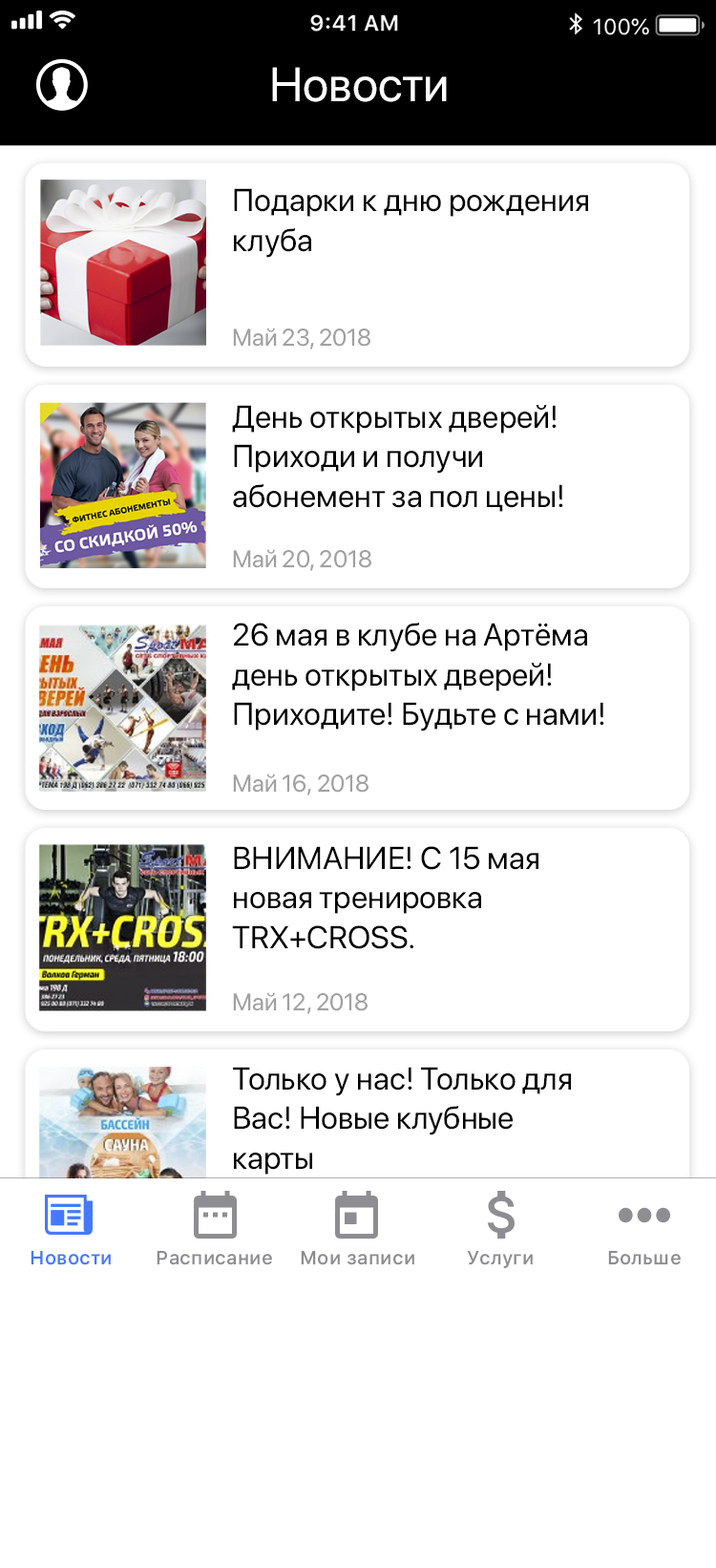
<style>
.page{position:relative;width:716px;height:1568px;background:#ffffff}
.page>*{position:absolute;margin:0}
.t1{font:47.7px "SFProDisplay-Regular";color:#ffffff}
.t2{font:31.5px/39.8px "SFProDisplay-Regular";color:#000000}
.t3{font:23.9px "SFProDisplay-Regular";color:#a1a1a1}
.t4{font:19px "SFProText-Medium";letter-spacing:0.012em;color:#4479fb}
.t5{font:19px "SFProText-Medium";letter-spacing:0.012em;color:#8d8d91}
</style>
<div class="page">
<p class="t1" style="left:272px;top:67px;width:175px;height:35px">Новости</p>
<p class="t2" style="left:234px;top:188px;width:354px;height:70px">Подарки к дню рождения<br>клуба</p>
<p class="t3" style="left:233px;top:328px;width:138px;height:22px">Май 23, 2018</p>
<p class="t2" style="left:232px;top:405px;width:331px;height:107px">День открытых дверей! <br>Приходи и получи <br>абонемент за пол цены!</p>
<p class="t3" style="left:233px;top:549px;width:138px;height:22px">Май 20, 2018</p>
<p class="t2" style="left:232px;top:623px;width:372px;height:108px">26 мая в клубе на Артёма <br>день открытых дверей! <br>Приходите! Будьте с нами!</p>
<p class="t3" style="left:233px;top:773px;width:136px;height:22px">Май 16, 2018</p>
<p class="t2" style="left:232px;top:846px;width:307px;height:103px">ВНИМАНИЕ! С 15 мая <br>новая тренировка <br>TRX+CROSS.</p>
<p class="t3" style="left:233px;top:992px;width:135px;height:22px">Май 12, 2018</p>
<p class="t2" style="left:233px;top:1067px;width:338px;height:108px">Только у нас! Только для<br>Вас! Новые клубные <br>карты</p>
<p class="t4" style="left:31px;top:1250px;width:80px;height:15px">Новости</p>
<p class="t5" style="left:157px;top:1250px;width:115px;height:15px">Расписание</p>
<p class="t5" style="left:301px;top:1250px;width:113px;height:15px">Мои записи</p>
<p class="t5" style="left:467px;top:1250px;width:66px;height:18px">Услуги</p>
<p class="t5" style="left:608px;top:1250px;width:73px;height:15px">Больше</p>
</div>
